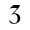
<style>
.page{position:relative;width:30px;height:30px;background:#ffffff}
.page>*{position:absolute;margin:0}
.t1{font:29px "Schwarzwald";color:#000000}
</style>
<div class="page">
<p class="t1" style="left:9px;top:5px;width:12px;height:19px">3</p>
</div>
